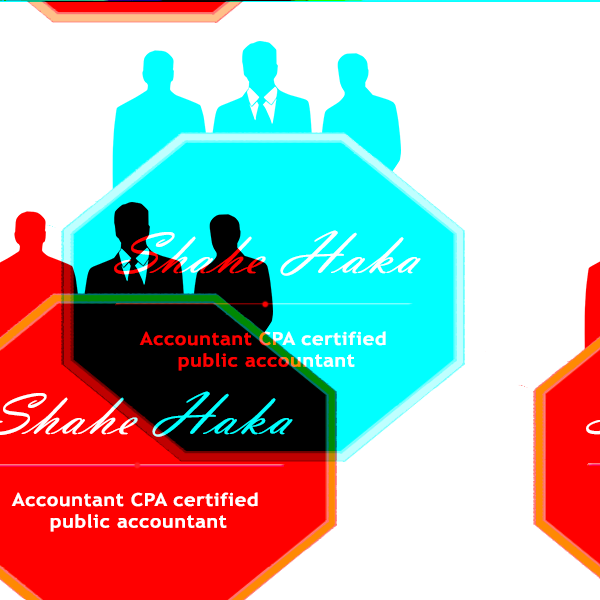
<style>
.page{position:relative;width:600px;height:600px;background:#ffffff}
.page>*{position:absolute;margin:0}
.t1{font:60px "VladimirScript";letter-spacing:0.025em;scale:1.12 1}
.t2{font:18px "TrebuchetMS-Bold";letter-spacing:0.025em;scale:1.12 1}
</style>
<div class="page">
<p class="t1" style="left:114px;top:228px;width:307px;height:46px">Shahe Haka</p>
<p class="t2" style="left:139px;top:329px;width:247px;height:40px;text-align:center">Accountant CPA certified <br>public accountant</p>
</div>
